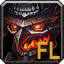
<style>
.page{position:relative;width:64px;height:64px}
.page>*{position:absolute;margin:0}
.t1{font:23.9px "ArialNarrow-Bold";color:#e0a534}
</style>
<div class="page">
<p class="t1" style="left:37px;top:41px;width:23px;height:18px">FL</p>
</div>
